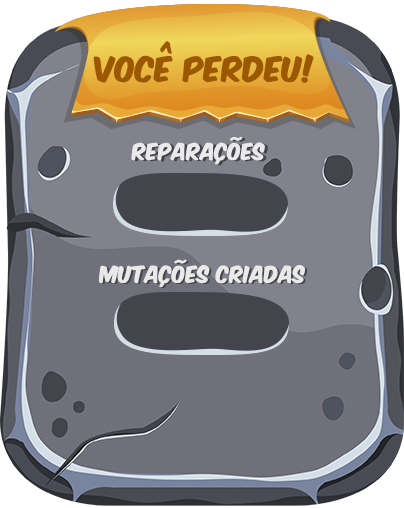
<style>
.page{position:relative;width:404px;height:508px}
.page>*{position:absolute;margin:0}
.t1{font:29.4px "KomikaAxis";letter-spacing:0.01em;color:#9b5800}
.t2{font:19.6px "KomikaAxis";letter-spacing:0.01em;color:#eaeaea}
.t3{font:19.6px "KomikaAxis";letter-spacing:0.01em;color:#e9e9e9}
</style>
<div class="page">
<p class="t1" style="left:93px;top:41px;width:221px;height:42px">Você perdeu!</p>
<p class="t2" style="left:131px;top:136px;width:134px;height:29px">REPARAÇÕES</p>
<p class="t3" style="left:99px;top:259px;width:206px;height:28px">mutações criadas</p>
</div>
